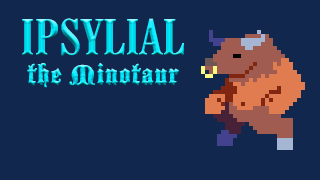
<style>
.page{position:relative;width:320px;height:180px;background:#12274d}
.page>*{position:absolute;margin:0}
.t1{font:50px "CenturySchoolbookW03-BdCnd";letter-spacing:0.025em}
.t2{font:30.5px "1BlackmoorLETPlain10";letter-spacing:0.025em}
</style>
<div class="page">
<p class="t1" style="left:22px;top:18px;width:162px;height:38px">IPSYLIAL</p>
<p class="t2" style="left:27px;top:63px;width:152px;height:25px">the Minotaur</p>
</div>
